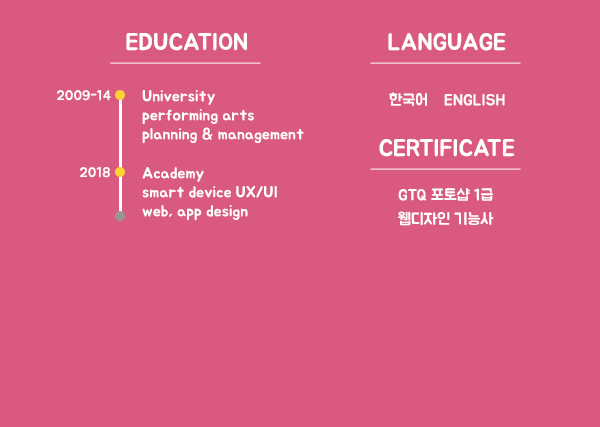
<style>
.page{position:relative;width:600px;height:427px;background:#da597f}
.page>*{position:absolute;margin:0}
.t1{font:24px "BMJUA";color:#ffffff}
.t2{font:14px "BMJUA";color:#fefefe}
.t3{font:16px "BMJUA";color:#fefefe}
.t4{font:24px "BMJUA";letter-spacing:-0.01em;color:#ffffff}
.t5{font:16px/24px "BMJUA";color:#fefefe}
</style>
<div class="page">
<p class="t1" style="left:126px;top:32px;width:121px;height:19px">EDUCATION</p>
<p class="t1" style="left:388px;top:32px;width:118px;height:19px">LANGUAGE</p>
<p class="t2" style="left:57px;top:90px;width:54px;height:11px">2009-14</p>
<p class="t3" style="left:142px;top:90px;width:162px;height:131px">University<br>performing arts<br>planning &amp; management<br><br>Academy<br>smart device UX/UI<br>web, app design</p>
<p class="t3" style="left:389px;top:92px;width:116px;height:14px">한국어    ENGLISH</p>
<p class="t4" style="left:379px;top:139px;width:136px;height:18px">CERTIFICATE</p>
<p class="t2" style="left:80px;top:167px;width:30px;height:11px">2018</p>
<p class="t5" style="left:398px;top:188px;width:96px;height:38px;text-align:center">GTQ 포토샵 1급<br>웹디자인 기능사</p>
</div>
